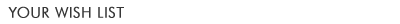
<style>
.page{position:relative;width:400px;height:24px;background:#ffffff}
.page>*{position:absolute;margin:0}
.t1{font:14.7px "FuturaBT-Light";letter-spacing:0.025em;color:#363636;text-transform:uppercase;font-weight:bold}
</style>
<div class="page">
<p class="t1" style="left:8px;top:6px;width:116px;height:12px">YOUR WISH LIST</p>
</div>
